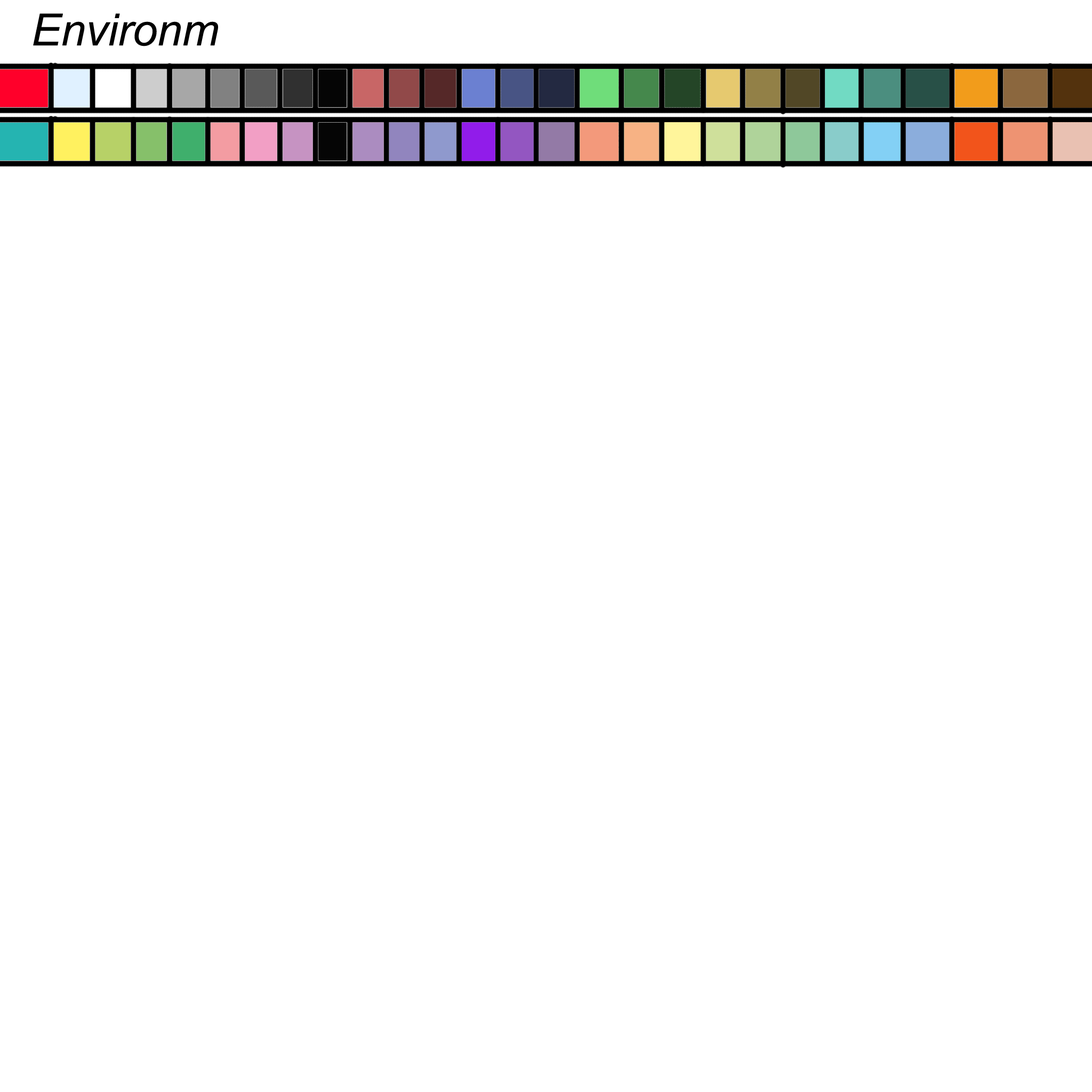
<style>
.page{position:relative;width:1092px;height:1092px;background:#ffffff}
.page>*{position:absolute;margin:0}
.t1{font:44.4px "Arial-ItalicMT";color:#000000}
</style>
<div class="page">
<p class="t1" style="left:33px;top:13px;width:185px;height:33px">Environment</p>
</div>
